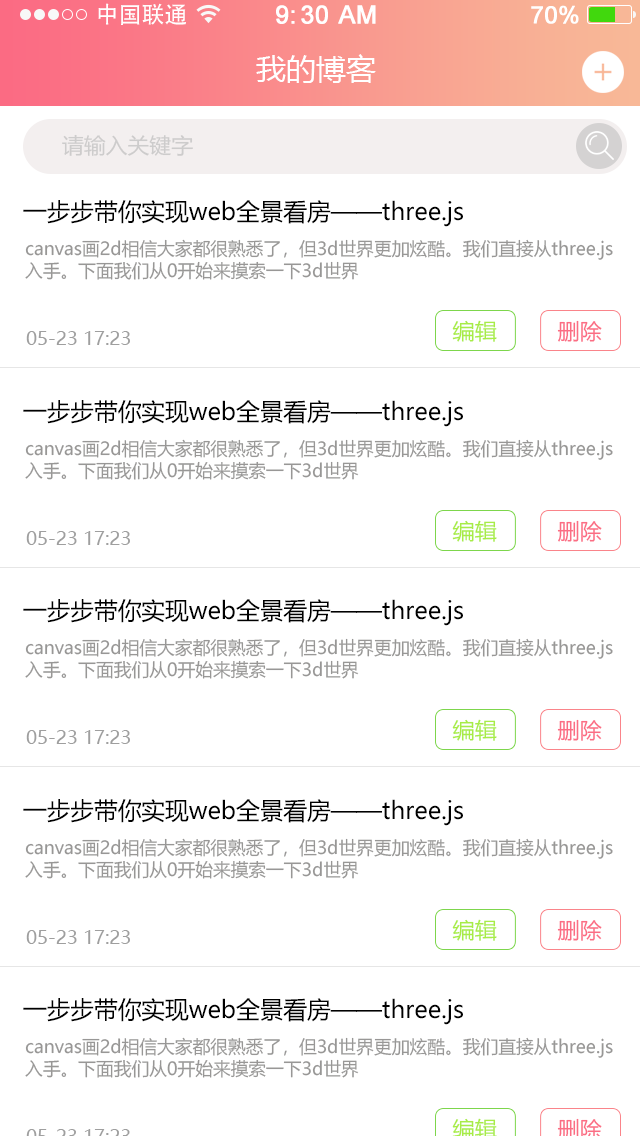
<style>
.page{position:relative;width:640px;height:1136px;background:#ffffff}
.page>*{position:absolute;margin:0}
.t1{font:23px "AdobeHeitiStd-Regular";color:#ffffff}
.t2{font:25px "ArialMT";color:#ffffff;font-weight:bold}
.t3{font:24px "ArialMT";color:#ffffff;font-weight:bold}
.t4{font:30px "MicrosoftYaHei";color:#ffffff}
.t5{font:21.6px "MicrosoftYaHei";color:#cdcccc}
.t6{font:24px "MicrosoftYaHei";color:#000000}
.t7{font:18px/22.3px "MicrosoftYaHei";color:#989796}
.t8{font:21.8px "MicrosoftYaHei";color:#a8ec46}
.t9{font:21.8px "MicrosoftYaHei";color:#fb6d84}
.t10{font:18px "MicrosoftYaHei";color:#9f9f9f;scale:1.03 1}
</style>
<div class="page">
<p class="t1" style="left:98px;top:3px;width:88px;height:22px">中国联通</p>
<p class="t2" style="left:276px;top:5px;width:100px;height:19px">9:30 AM</p>
<p class="t3" style="left:531px;top:5px;width:48px;height:19px">70%</p>
<p class="t4" style="left:256px;top:54px;width:120px;height:29px">我的博客</p>
<p class="t5" style="left:62px;top:134px;width:131px;height:22px">请输入关键字</p>
<p class="t6" style="left:23px;top:200px;width:440px;height:27px">一步步带你实现web全景看房——three.js</p>
<p class="t7" style="left:25px;top:239px;width:588px;height:41px">canvas画2d相信大家都很熟悉了，但3d世界更加炫酷。我们直接从three.js<br>入手。下面我们从0开始来摸索一下3d世界</p>
<p class="t8" style="left:452px;top:320px;width:45px;height:22px">编辑</p>
<p class="t9" style="left:557px;top:320px;width:45px;height:22px">删除</p>
<p class="t10" style="left:26px;top:331px;width:104px;height:14px">05-23 17:23</p>
<p class="t6" style="left:23px;top:400px;width:440px;height:27px">一步步带你实现web全景看房——three.js</p>
<p class="t7" style="left:25px;top:439px;width:588px;height:41px">canvas画2d相信大家都很熟悉了，但3d世界更加炫酷。我们直接从three.js<br>入手。下面我们从0开始来摸索一下3d世界</p>
<p class="t8" style="left:452px;top:520px;width:45px;height:22px">编辑</p>
<p class="t9" style="left:557px;top:520px;width:45px;height:22px">删除</p>
<p class="t10" style="left:26px;top:531px;width:104px;height:14px">05-23 17:23</p>
<p class="t6" style="left:23px;top:599px;width:440px;height:27px">一步步带你实现web全景看房——three.js</p>
<p class="t7" style="left:25px;top:638px;width:588px;height:41px">canvas画2d相信大家都很熟悉了，但3d世界更加炫酷。我们直接从three.js<br>入手。下面我们从0开始来摸索一下3d世界</p>
<p class="t8" style="left:452px;top:719px;width:45px;height:22px">编辑</p>
<p class="t9" style="left:557px;top:719px;width:45px;height:22px">删除</p>
<p class="t10" style="left:26px;top:730px;width:104px;height:14px">05-23 17:23</p>
<p class="t6" style="left:23px;top:799px;width:440px;height:27px">一步步带你实现web全景看房——three.js</p>
<p class="t7" style="left:25px;top:838px;width:588px;height:41px">canvas画2d相信大家都很熟悉了，但3d世界更加炫酷。我们直接从three.js<br>入手。下面我们从0开始来摸索一下3d世界</p>
<p class="t8" style="left:452px;top:919px;width:45px;height:22px">编辑</p>
<p class="t9" style="left:557px;top:919px;width:45px;height:22px">删除</p>
<p class="t10" style="left:26px;top:930px;width:104px;height:14px">05-23 17:23</p>
<p class="t6" style="left:23px;top:998px;width:440px;height:27px">一步步带你实现web全景看房——three.js</p>
<p class="t7" style="left:25px;top:1037px;width:588px;height:41px">canvas画2d相信大家都很熟悉了，但3d世界更加炫酷。我们直接从three.js<br>入手。下面我们从0开始来摸索一下3d世界</p>
</div>
